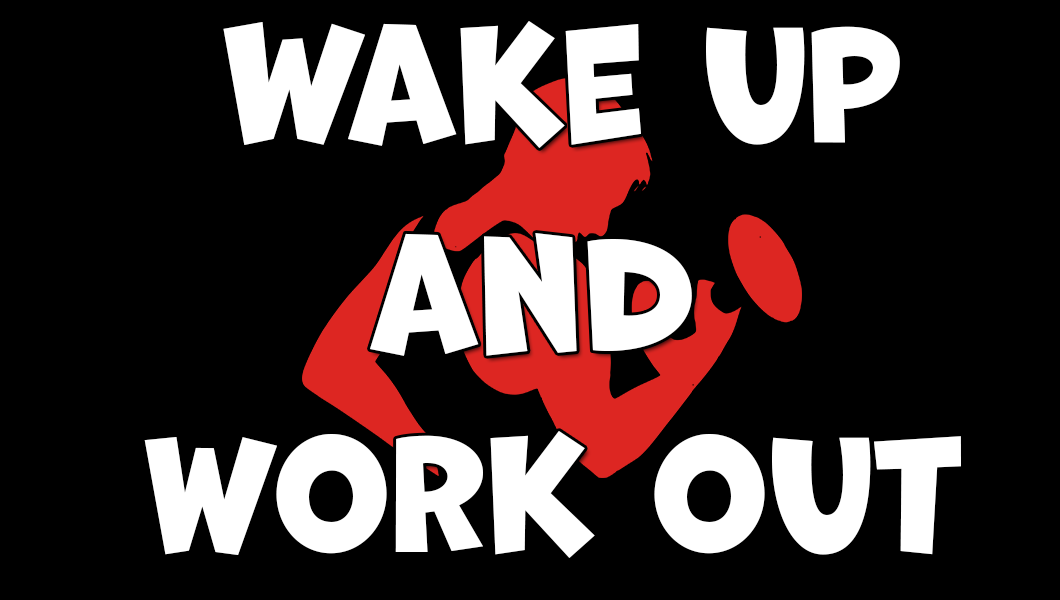
<style>
.page{position:relative;width:1060px;height:600px;background:#000000}
.page>*{position:absolute;margin:0}
.t1{font:150px "Marvin";color:#ffffff}
</style>
<div class="page">
<p class="t1" style="left:223px;top:21px;width:677px;height:127px">Wake up</p>
<p class="t1" style="left:370px;top:233px;width:322px;height:123px">and</p>
<p class="t1" style="left:144px;top:431px;width:817px;height:127px">work out</p>
</div>
